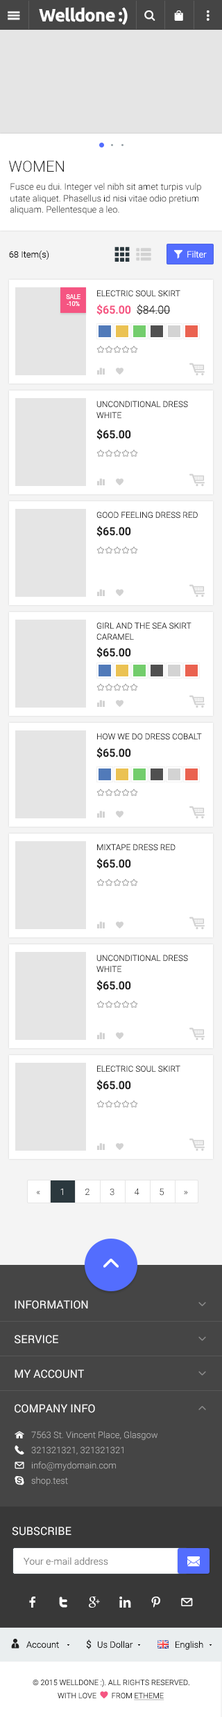
<style>
.page{position:relative;width:222px;height:1717px;background:#ffffff}
.page>*{position:absolute;margin:0}
.t1{font:18px "Ubuntu-Bold";letter-spacing:-0.04em;color:#ffffff}
.t2{font:15.2px "Roboto-Light";color:#212121;text-transform:uppercase}
.t3{font:9px/11.4px "Roboto-Light";color:#000000}
.t4{font:9px "Roboto-Light";color:#000000}
.t5{font:9px "Roboto-Light";color:#ffffff}
.t6{font:8.3px "Roboto-Light";color:#2b2b2b;text-transform:uppercase}
.t7{font:5.9px/6.9px "Roboto-Regular";color:#ffffff;text-transform:uppercase}
.t8{font:11.1px "Roboto-Medium";color:#f55582}
.t9{font:11.1px "Roboto-Light";color:#212121}
.t10{font:8.3px/11.1px "Roboto-Light";color:#2b2b2b;text-transform:uppercase}
.t11{font:11.1px "Roboto-Medium";color:#212121}
.t12{font:11.1px/34.6px "Roboto-Regular";color:#ffffff;text-transform:uppercase}
.t13{font:9px/15.2px "Roboto-Light";color:#bbbbbb}
.t14{font:11.1px "Roboto-Regular";color:#ffffff;text-transform:uppercase}
.t15{font:9.7px "Roboto-Light";color:#848484}
.t16{font:9.7px "Roboto-Regular";color:#212121}
.t17{font:7.6px "Roboto-Light";color:#2b2b2b;text-transform:uppercase}
</style>
<div class="page">
<p class="t1" style="left:39px;top:7px;width:88px;height:18px">Welldone :)</p>
<p class="t2" style="left:9px;top:161px;width:55px;height:11px">Women</p>
<p class="t3" style="left:10px;top:183px;width:191px;height:32px">Fusce eu dui. Integer vel nibh sit amet turpis vulp utate aliquet. Phasellus id nisi vitae odio pretium aliquam. Pellentesque a leo. <br><br><br>lectus sed felis. Quisque vestibulum massa.</p>
<p class="t4" style="left:9px;top:251px;width:40px;height:9px">68 Item(s)</p>
<p class="t5" style="left:187px;top:251px;width:19px;height:7px">Filter</p>
<p class="t6" style="left:97px;top:290px;width:83px;height:7px">Electric Soul Skirt</p>
<p class="t7" style="left:66px;top:294px;width:14px;height:12px;text-align:center">sale<br>-10%</p>
<p class="t8" style="left:96px;top:304px;width:74px;height:11px">$65.00  <span class="t9">$84.00</span></p>
<p class="t10" style="left:96px;top:401px;width:92px;height:17px">Unconditional Dress <br>White</p>
<p class="t11" style="left:96px;top:429px;width:35px;height:11px">$65.00</p>
<p class="t6" style="left:96px;top:512px;width:101px;height:7px">Good Feeling Dress Red</p>
<p class="t11" style="left:96px;top:525px;width:35px;height:12px">$65.00</p>
<p class="t10" style="left:96px;top:622px;width:95px;height:18px">Girl And The Sea Skirt <br>Caramel</p>
<p class="t11" style="left:96px;top:647px;width:35px;height:11px">$65.00</p>
<p class="t6" style="left:97px;top:733px;width:104px;height:7px">How We Do Dress Cobalt</p>
<p class="t11" style="left:96px;top:747px;width:35px;height:11px">$65.00</p>
<p class="t6" style="left:97px;top:844px;width:78px;height:7px">Mixtape Dress Red</p>
<p class="t11" style="left:96px;top:858px;width:35px;height:11px">$65.00</p>
<p class="t10" style="left:96px;top:955px;width:92px;height:17px">Unconditional Dress<br>White</p>
<p class="t11" style="left:96px;top:980px;width:35px;height:11px">$65.00</p>
<p class="t6" style="left:97px;top:1065px;width:83px;height:7px">Electric Soul Skirt</p>
<p class="t11" style="left:96px;top:1079px;width:35px;height:11px">$65.00</p>
<p class="t12" style="left:15px;top:1300px;width:80px;height:113px">Information<br>service<br>My account<br>Company Info</p>
<p class="t13" style="left:31px;top:1431px;width:126px;height:55px">7563 St. Vincent Place, Glasgow<br>321321321, 321321321<br>info@mydomain.com<br>shop.test</p>
<p class="t14" style="left:12px;top:1527px;width:59px;height:9px">Subscribe</p>
<p class="t15" style="left:24px;top:1557px;width:84px;height:8px">Your e-mail address</p>
<p class="t4" style="left:26px;top:1641px;width:33px;height:7px">Account</p>
<p class="t16" style="left:86px;top:1639px;width:5px;height:10px">$</p>
<p class="t4" style="left:98px;top:1641px;width:35px;height:7px">Us Dollar</p>
<p class="t4" style="left:175px;top:1641px;width:28px;height:9px">English</p>
<p class="t17" style="left:33px;top:1679px;width:156px;height:8px">© 2015 Welldone :). All Rights Reserved.</p>
</div>
